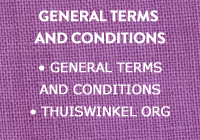
<style>
.page{position:relative;width:200px;height:140px}
.page>*{position:absolute;margin:0}
.t1{font:15px/22px "BrandonGrotesque-Bold";letter-spacing:-0.02em;color:#ffffff;font-weight:bold}
.t2{font:13px/22px "Verdana";letter-spacing:-0.02em;color:#ffffff;font-weight:bold}
</style>
<div class="page">
<p class="t1" style="left:34px;top:10px;width:132px;height:34px;text-align:center">GENERAL TERMS <br>AND CONDITIONS</p>
<p class="t2" style="left:30px;top:62px;width:140px;height:55px;text-align:center">• GENERAL TERMS<br>AND CONDITIONS<br>• THUISWINKEL ORG</p>
</div>
